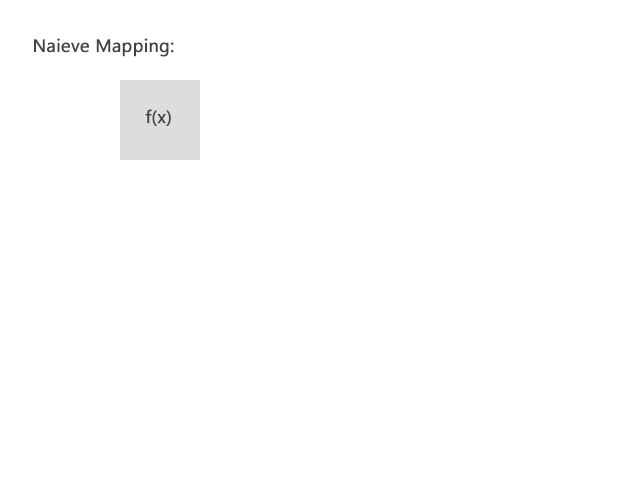
<style>
.page{position:relative;width:640px;height:480px;background:#ffffff}
.page>*{position:absolute;margin:0}
.t1{font:18px "LaoUI";color:#424242;font-weight:bold}
</style>
<div class="page">
<p class="t1" style="left:34px;top:38px;width:140px;height:19px">Naieve Mapping:</p>
<p class="t1" style="left:145px;top:109px;width:26px;height:17px">f(x)</p>
</div>
